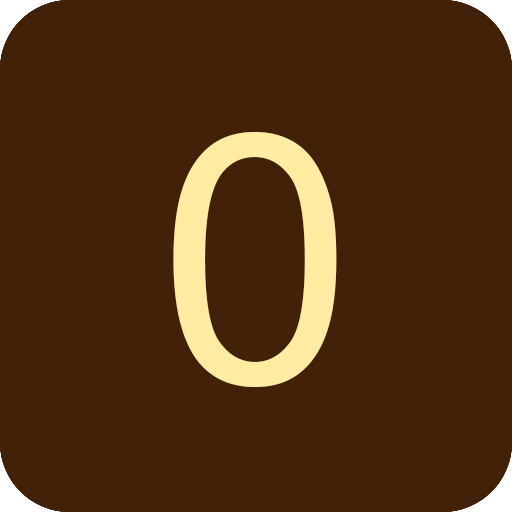
<style>
.page{position:relative;width:512px;height:512px;background:#412209}
.page>*{position:absolute;margin:0}
.t1{font:349px "ArialMT";color:#ffeba1}
</style>
<div class="page">
<p class="t1" style="left:173px;top:132px;width:164px;height:255px">0</p>
</div>
